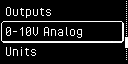
<style>
.page{position:relative;width:128px;height:64px;background:#000000}
.page>*{position:absolute;margin:0}
.t1{font:16px "PixelOperator";color:#ffffff}
</style>
<div class="page">
<p class="t1" style="left:5px;top:7px;width:46px;height:11px">Outputs</p>
<p class="t1" style="left:5px;top:27px;width:77px;height:11px">0-10V Analog</p>
<p class="t1" style="left:5px;top:47px;width:31px;height:9px">Units</p>
</div>
